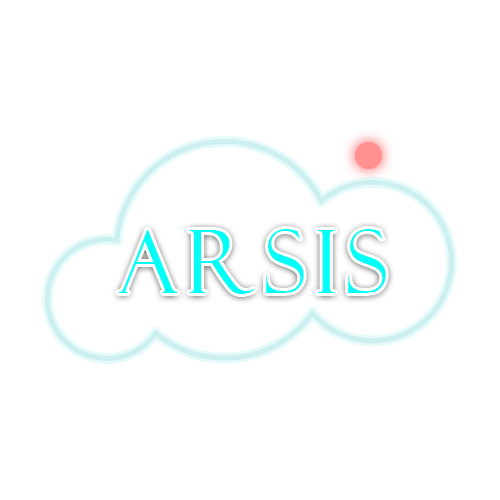
<style>
.page{position:relative;width:500px;height:500px;background:#ffffff}
.page>*{position:absolute;margin:0}
.t1{font:87.1px "FelixTitlingMT";letter-spacing:0.1em;color:#00fff6}
</style>
<div class="page">
<p class="t1" style="left:118px;top:229px;width:268px;height:65px">ARSIS</p>
</div>
